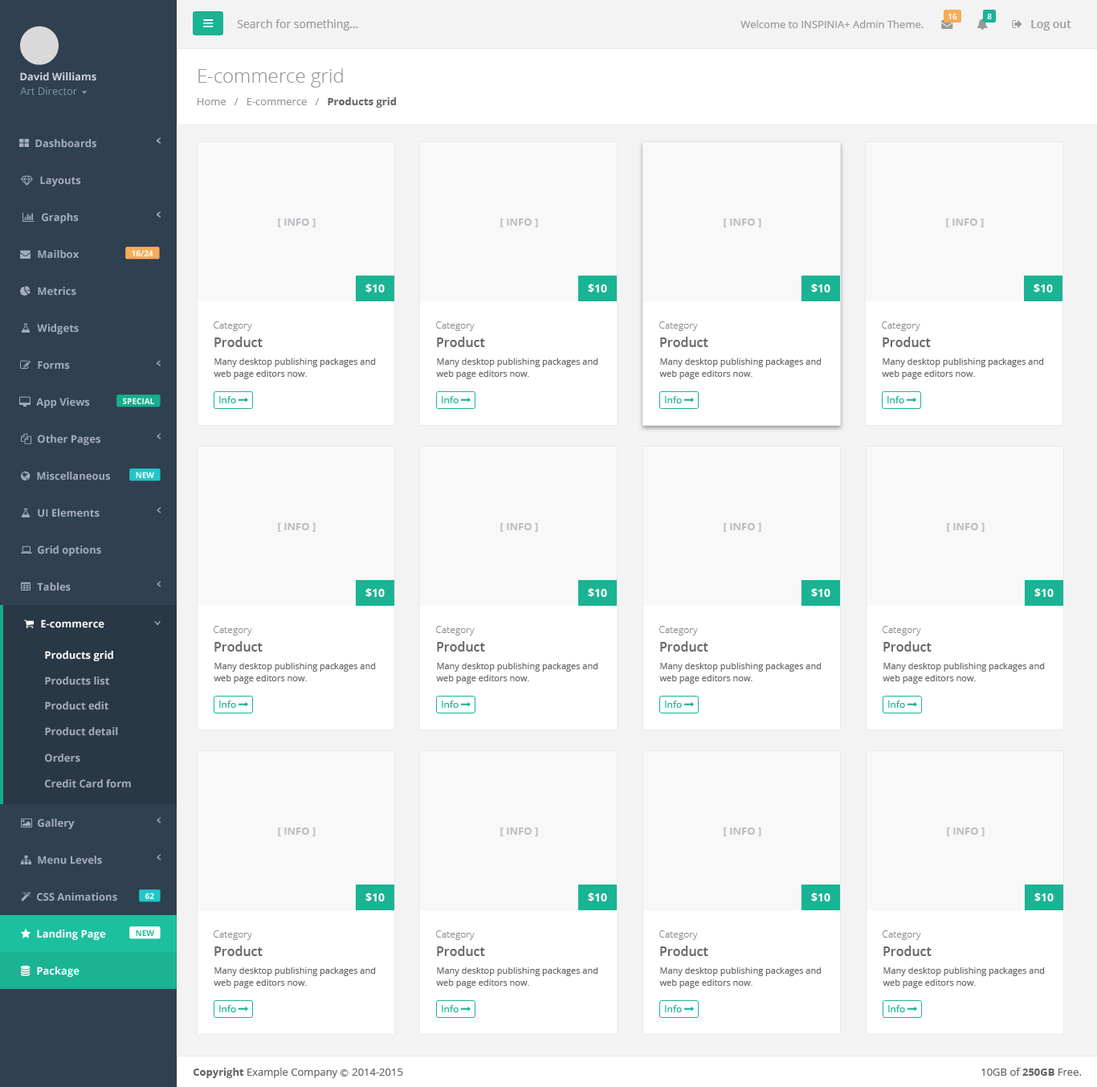
<style>
.page{position:relative;width:1097px;height:1087px;background:#f8f8f9}
.page>*{position:absolute;margin:0}
.t1{font:8px "OpenSans-Semibold";color:#ffffff}
.t2{font:11.2px "OpenSans";color:#999999}
.t3{font:10.4px "OpenSans";color:#999999}
.t4{font:11.2px "OpenSans-Semibold";color:#999999}
.t5{font:10.4px "OpenSans-Bold";color:#cad1db}
.t6{font:19.3px "OpenSans-Light";color:#999999}
.t7{font:10.4px "OpenSans";color:#7d93a5}
.t8{font:10.4px "OpenSans-Bold";color:#676a6c}
.t9{font:10.4px "OpenSans-Bold";color:#a2acbd}
.t10{font:10.4px "OpenSans-Bold";color:#bebec3}
.t11{font:8px "OpenSans-Bold";color:#fefefe}
.t12{font:11.2px "OpenSans-Bold";color:#fff8f8}
.t13{font:9.6px "OpenSans-Light";color:#8c8c8c}
.t14{font:12.9px "OpenSans-Semibold";color:#676a6c}
.t15{font:8.8px/12.1px "OpenSans";color:#676a6c}
.t16{font:9.6px "OpenSans";color:#1ab394}
.t17{font:10.4px "OpenSans-Bold";color:#ffffff}
.t18{font:8px "OpenSans-Bold";color:#1cc09f}
.t19{font:10.4px "OpenSans";color:#666666}
.t20{font:10.4px "OpenSans-Bold";color:#666666}
.t21{font:8px "Meiryo";color:#666666}
</style>
<div class="page">
<p class="t1" style="left:949px;top:14px;width:8px;height:5px">16</p>
<p class="t1" style="left:987px;top:14px;width:5px;height:5px">8</p>
<p class="t2" style="left:237px;top:19px;width:121px;height:12px">Search for something...</p>
<p class="t3" style="left:741px;top:20px;width:183px;height:8px">Welcome to INSPINIA+ Admin Theme.</p>
<p class="t4" style="left:1031px;top:20px;width:41px;height:11px">Log out</p>
<p class="t5" style="left:20px;top:72px;width:76px;height:9px">David Williams</p>
<p class="t6" style="left:198px;top:68px;width:145px;height:20px">E-commerce grid</p>
<p class="t7" style="left:20px;top:87px;width:57px;height:9px">Art Director</p>
<p class="t3" style="left:197px;top:97px;width:200px;height:11px">Home   /   E-commerce   /   <span class="t8">Products grid</span></p>
<p class="t9" style="left:35px;top:139px;width:61px;height:9px">Dashboards</p>
<p class="t9" style="left:40px;top:176px;width:41px;height:10px">Layouts</p>
<p class="t9" style="left:42px;top:213px;width:37px;height:10px">Graphs</p>
<p class="t10" style="left:278px;top:218px;width:38px;height:9px">[ INFO ]</p>
<p class="t10" style="left:500px;top:218px;width:38px;height:9px">[ INFO ]</p>
<p class="t10" style="left:724px;top:218px;width:37px;height:9px">[ INFO ]</p>
<p class="t10" style="left:946px;top:218px;width:38px;height:9px">[ INFO ]</p>
<p class="t9" style="left:38px;top:250px;width:41px;height:9px">Mailbox</p>
<p class="t11" style="left:132px;top:250px;width:21px;height:6px">16/24</p>
<p class="t9" style="left:38px;top:287px;width:38px;height:9px">Metrics</p>
<p class="t12" style="left:365px;top:284px;width:20px;height:8px">$10</p>
<p class="t12" style="left:588px;top:284px;width:19px;height:8px">$10</p>
<p class="t12" style="left:811px;top:284px;width:20px;height:8px">$10</p>
<p class="t12" style="left:1034px;top:284px;width:19px;height:8px">$10</p>
<p class="t9" style="left:37px;top:324px;width:42px;height:10px">Widgets</p>
<p class="t13" style="left:214px;top:321px;width:38px;height:10px">Category</p>
<p class="t13" style="left:436px;top:321px;width:39px;height:10px">Category</p>
<p class="t13" style="left:659px;top:321px;width:39px;height:10px">Category</p>
<p class="t13" style="left:882px;top:321px;width:39px;height:10px">Category</p>
<p class="t14" style="left:214px;top:337px;width:49px;height:10px">Product</p>
<p class="t14" style="left:437px;top:337px;width:48px;height:10px">Product</p>
<p class="t14" style="left:660px;top:337px;width:48px;height:10px">Product</p>
<p class="t14" style="left:883px;top:337px;width:48px;height:10px">Product</p>
<p class="t9" style="left:38px;top:361px;width:32px;height:8px">Forms</p>
<p class="t15" style="left:214px;top:358px;width:162px;height:21px">Many desktop publishing packages and web page editors now.</p>
<p class="t15" style="left:436px;top:358px;width:162px;height:21px">Many desktop publishing packages and web page editors now.</p>
<p class="t15" style="left:659px;top:358px;width:163px;height:21px">Many desktop publishing packages and web page editors now.</p>
<p class="t15" style="left:882px;top:358px;width:162px;height:21px">Many desktop publishing packages and web page editors now.</p>
<p class="t9" style="left:36px;top:398px;width:54px;height:10px">App Views</p>
<p class="t11" style="left:123px;top:398px;width:31px;height:6px">SPECIAL</p>
<p class="t16" style="left:219px;top:396px;width:17px;height:7px">Info</p>
<p class="t16" style="left:442px;top:396px;width:17px;height:7px">Info</p>
<p class="t16" style="left:665px;top:396px;width:17px;height:7px">Info</p>
<p class="t16" style="left:888px;top:396px;width:16px;height:7px">Info</p>
<p class="t9" style="left:38px;top:435px;width:62px;height:10px">Other Pages</p>
<p class="t9" style="left:37px;top:471px;width:73px;height:9px">Miscellaneous</p>
<p class="t11" style="left:136px;top:471px;width:18px;height:7px">NEW</p>
<p class="t9" style="left:38px;top:508px;width:62px;height:9px">UI Elements</p>
<p class="t10" style="left:278px;top:523px;width:38px;height:9px">[ INFO ]</p>
<p class="t10" style="left:500px;top:523px;width:38px;height:9px">[ INFO ]</p>
<p class="t10" style="left:724px;top:523px;width:37px;height:9px">[ INFO ]</p>
<p class="t10" style="left:947px;top:523px;width:38px;height:9px">[ INFO ]</p>
<p class="t9" style="left:38px;top:545px;width:63px;height:11px">Grid options</p>
<p class="t9" style="left:37px;top:582px;width:34px;height:9px">Tables</p>
<p class="t12" style="left:365px;top:588px;width:20px;height:9px">$10</p>
<p class="t12" style="left:588px;top:588px;width:19px;height:9px">$10</p>
<p class="t12" style="left:811px;top:588px;width:20px;height:9px">$10</p>
<p class="t12" style="left:1035px;top:588px;width:19px;height:9px">$10</p>
<p class="t17" style="left:41px;top:619px;width:63px;height:9px">E-commerce</p>
<p class="t13" style="left:214px;top:626px;width:38px;height:9px">Category</p>
<p class="t13" style="left:436px;top:626px;width:39px;height:9px">Category</p>
<p class="t13" style="left:659px;top:626px;width:39px;height:9px">Category</p>
<p class="t13" style="left:883px;top:626px;width:38px;height:9px">Category</p>
<p class="t14" style="left:214px;top:641px;width:49px;height:10px">Product</p>
<p class="t14" style="left:437px;top:641px;width:48px;height:10px">Product</p>
<p class="t14" style="left:660px;top:641px;width:48px;height:10px">Product</p>
<p class="t14" style="left:884px;top:641px;width:48px;height:10px">Product</p>
<p class="t17" style="left:45px;top:651px;width:68px;height:10px">Products grid</p>
<p class="t15" style="left:214px;top:663px;width:162px;height:21px">Many desktop publishing packages and web page editors now.</p>
<p class="t15" style="left:436px;top:663px;width:162px;height:21px">Many desktop publishing packages and web page editors now.</p>
<p class="t15" style="left:659px;top:663px;width:163px;height:21px">Many desktop publishing packages and web page editors now.</p>
<p class="t15" style="left:883px;top:663px;width:162px;height:21px">Many desktop publishing packages and web page editors now.</p>
<p class="t9" style="left:45px;top:676px;width:64px;height:9px">Products list</p>
<p class="t9" style="left:45px;top:701px;width:63px;height:9px">Product edit</p>
<p class="t16" style="left:219px;top:700px;width:17px;height:8px">Info</p>
<p class="t16" style="left:442px;top:700px;width:17px;height:8px">Info</p>
<p class="t16" style="left:665px;top:700px;width:17px;height:8px">Info</p>
<p class="t16" style="left:888px;top:700px;width:17px;height:8px">Info</p>
<p class="t9" style="left:45px;top:727px;width:73px;height:9px">Product detail</p>
<p class="t9" style="left:45px;top:753px;width:35px;height:9px">Orders</p>
<p class="t9" style="left:45px;top:779px;width:86px;height:9px">Credit Card form</p>
<p class="t9" style="left:38px;top:818px;width:37px;height:11px">Gallery</p>
<p class="t10" style="left:278px;top:827px;width:38px;height:9px">[ INFO ]</p>
<p class="t10" style="left:500px;top:827px;width:38px;height:9px">[ INFO ]</p>
<p class="t10" style="left:724px;top:827px;width:37px;height:9px">[ INFO ]</p>
<p class="t10" style="left:947px;top:827px;width:38px;height:9px">[ INFO ]</p>
<p class="t9" style="left:38px;top:855px;width:64px;height:9px">Menu Levels</p>
<p class="t9" style="left:37px;top:892px;width:80px;height:9px">CSS Animations</p>
<p class="t11" style="left:145px;top:892px;width:9px;height:7px">62</p>
<p class="t12" style="left:365px;top:892px;width:20px;height:9px">$10</p>
<p class="t12" style="left:588px;top:892px;width:19px;height:9px">$10</p>
<p class="t12" style="left:811px;top:892px;width:20px;height:9px">$10</p>
<p class="t12" style="left:1035px;top:892px;width:19px;height:9px">$10</p>
<p class="t17" style="left:37px;top:929px;width:69px;height:11px">Landing Page</p>
<p class="t18" style="left:136px;top:929px;width:18px;height:7px">NEW</p>
<p class="t13" style="left:214px;top:930px;width:38px;height:10px">Category</p>
<p class="t13" style="left:436px;top:930px;width:39px;height:10px">Category</p>
<p class="t13" style="left:659px;top:930px;width:39px;height:10px">Category</p>
<p class="t13" style="left:883px;top:930px;width:38px;height:10px">Category</p>
<p class="t14" style="left:214px;top:945px;width:49px;height:11px">Product</p>
<p class="t14" style="left:437px;top:945px;width:48px;height:11px">Product</p>
<p class="t14" style="left:660px;top:945px;width:48px;height:11px">Product</p>
<p class="t14" style="left:884px;top:945px;width:48px;height:11px">Product</p>
<p class="t17" style="left:37px;top:966px;width:43px;height:11px">Package</p>
<p class="t15" style="left:214px;top:967px;width:162px;height:21px">Many desktop publishing packages and web page editors now.</p>
<p class="t15" style="left:436px;top:967px;width:162px;height:21px">Many desktop publishing packages and web page editors now.</p>
<p class="t15" style="left:659px;top:967px;width:163px;height:21px">Many desktop publishing packages and web page editors now.</p>
<p class="t15" style="left:883px;top:967px;width:162px;height:21px">Many desktop publishing packages and web page editors now.</p>
<p class="t16" style="left:219px;top:1005px;width:17px;height:7px">Info</p>
<p class="t16" style="left:442px;top:1005px;width:17px;height:7px">Info</p>
<p class="t16" style="left:665px;top:1005px;width:17px;height:7px">Info</p>
<p class="t16" style="left:888px;top:1005px;width:17px;height:7px">Info</p>
<p class="t19" style="left:193px;top:1067px;width:210px;height:11px"><span class="t20">Copyright</span> Example Company <span class="t21">Ⓒ </span>2014-2015</p>
<p class="t19" style="left:982px;top:1067px;width:100px;height:9px">10GB of <span class="t20">250GB</span> Free.</p>
</div>
